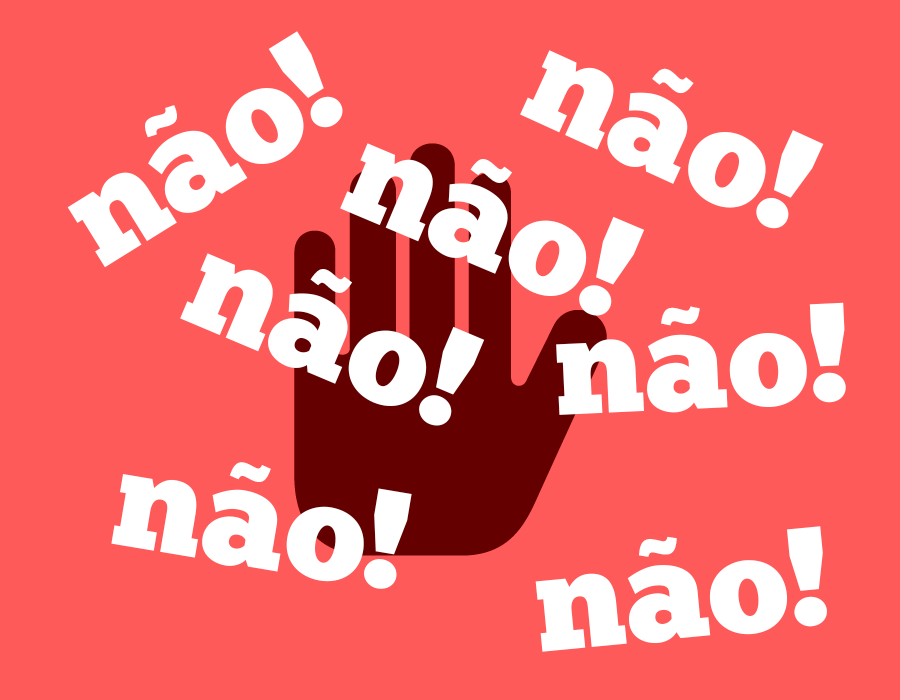
<style>
.page{position:relative;width:900px;height:700px;background:#ff5a5a}
.page>*{position:absolute;margin:0}
.t1{font:141px "ChunkFive-Roman";color:#ffffff}
.t2{font:92.7px "GothamUltra";color:#ffffff}
</style>
<div class="page">
<p class="t1" style="left:67px;top:31px;width:276px;height:237px;rotate:-32deg">nao!</p>
<p class="t1" style="left:520px;top:50px;width:304px;height:179px;rotate:25deg">nao!</p>
<p class="t2" style="left:652px;top:68px;width:42px;height:26px;rotate:25deg">~</p>
<p class="t2" style="left:145px;top:105px;width:32px;height:33px;rotate:-32deg">~</p>
<p class="t1" style="left:340px;top:143px;width:305px;height:173px;rotate:23deg">nao!</p>
<p class="t2" style="left:470px;top:159px;width:42px;height:24px;rotate:23deg">~</p>
<p class="t1" style="left:180px;top:253px;width:305px;height:173px;rotate:23deg">nao!</p>
<p class="t2" style="left:310px;top:269px;width:42px;height:24px;rotate:23deg">~</p>
<p class="t1" style="left:556px;top:302px;width:290px;height:113px;rotate:-3deg">nao!</p>
<p class="t2" style="left:661px;top:306px;width:39px;height:20px;rotate:-3deg">~</p>
<p class="t2" style="left:229px;top:462px;width:42px;height:20px;rotate:10deg">~</p>
<p class="t1" style="left:111px;top:474px;width:301px;height:115px;rotate:10deg">nao!</p>
<p class="t1" style="left:535px;top:526px;width:292px;height:126px;rotate:-5deg">nao!</p>
<p class="t2" style="left:639px;top:536px;width:38px;height:21px;rotate:-5deg">~</p>
</div>
